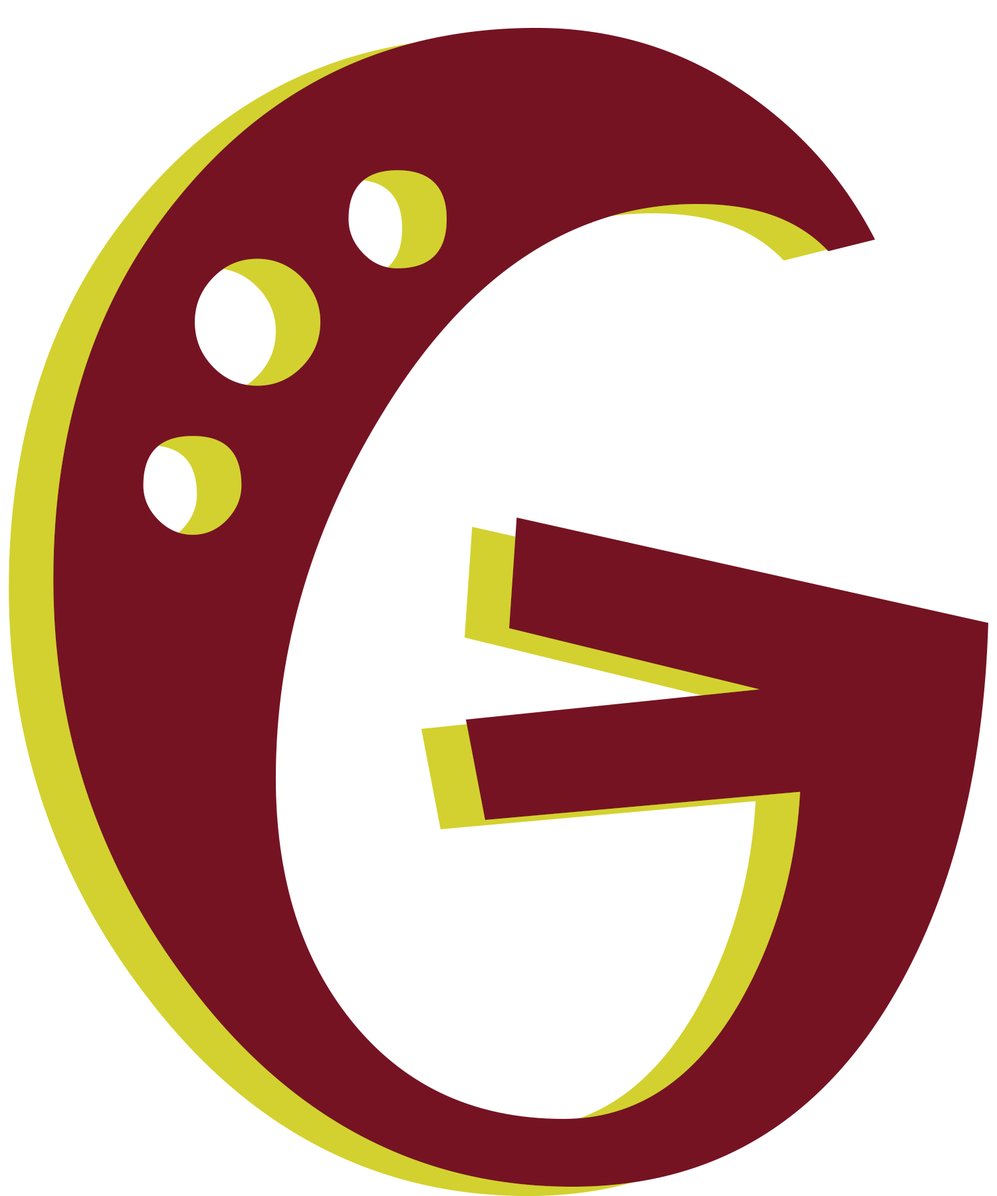
<style>
.page{position:relative;width:997px;height:1196px;background:#ffffff}
.page>*{position:absolute;margin:0}
.t1{font:1405.5px "Jokerman-Regular";color:#751323}
</style>
<div class="page">
<p class="t1" style="left:53px;top:28px;width:935px;height:1159px">G</p>
<p class="t1" style="left:9px;top:37px;width:935px;height:1159px">G</p>
</div>
